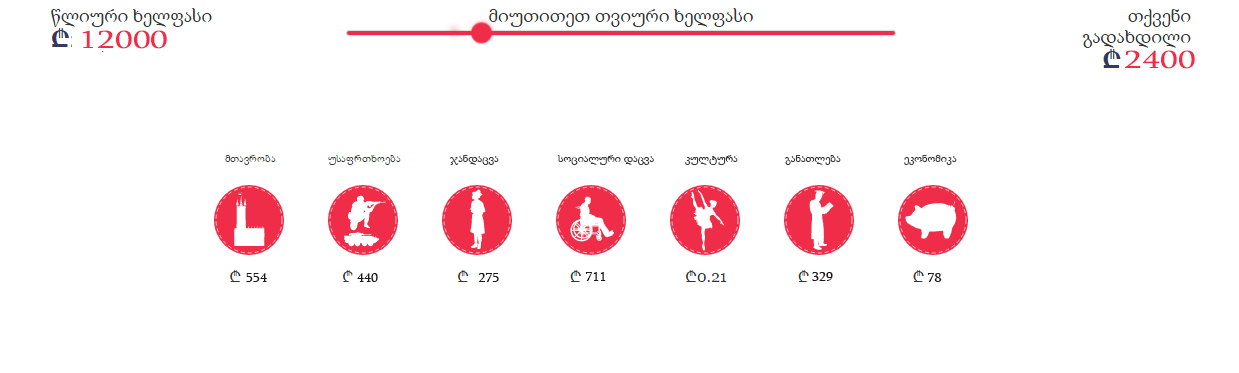
<style>
.page{position:relative;width:1239px;height:373px;background:#ffffff}
.page>*{position:absolute;margin:0}
.t1{font:25.6px "Sylfaen";color:#f02d49;scale:1.39 1}
.t2{font:11px "Sylfaen";color:#383837}
.t3{font:14px "Sylfaen";color:#1c1819}
</style>
<div class="page">
<p class="t1" style="left:82px;top:30px;width:85px;height:19px">12000</p>
<p class="t1" style="left:1124px;top:50px;width:71px;height:19px">2400</p>
<p class="t2" style="left:450px;top:155px;width:507px;height:10px">ჯანდაცვა          სოციალური დაცვა        კულტურა      განათლება          ეკონომიკა</p>
<p class="t3" style="left:246px;top:273px;width:21px;height:9px">554</p>
<p class="t3" style="left:357px;top:273px;width:21px;height:9px">440</p>
<p class="t3" style="left:478px;top:273px;width:21px;height:9px">275</p>
<p class="t3" style="left:585px;top:272px;width:21px;height:9px">711</p>
<p class="t3" style="left:812px;top:272px;width:21px;height:9px">329</p>
<p class="t3" style="left:927px;top:273px;width:15px;height:9px">78</p>
</div>
